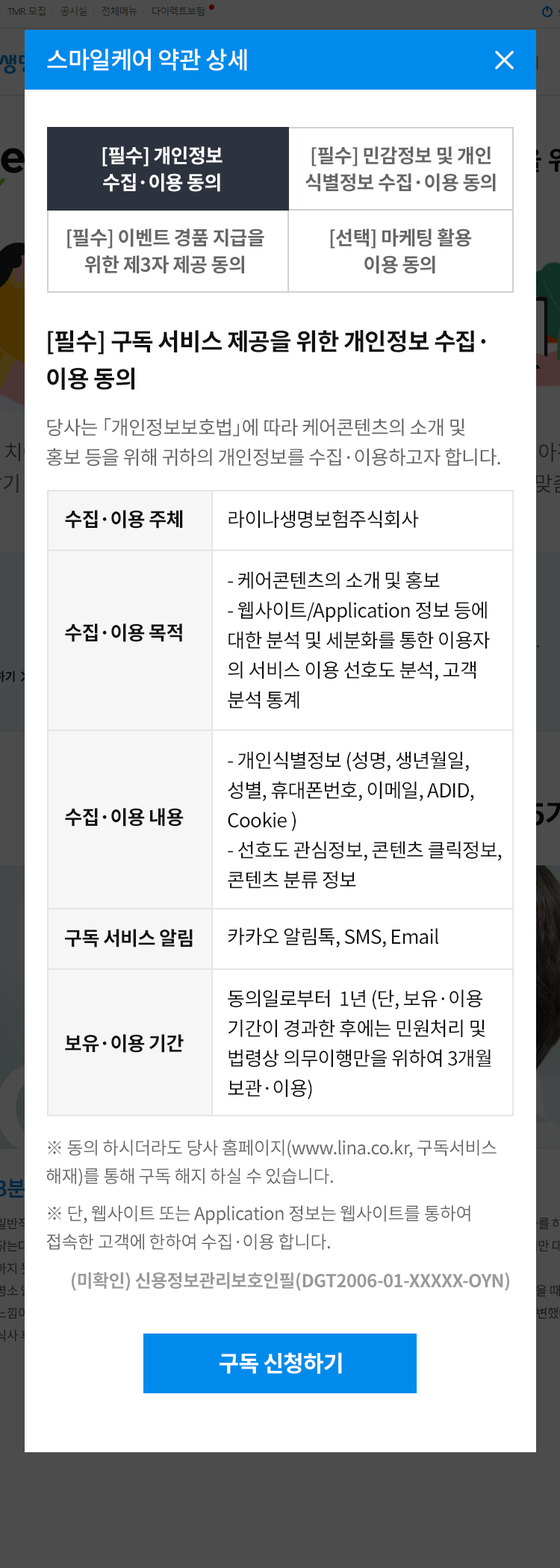
<style>
.page{position:relative;width:560px;height:1568px;background:#ffffff}
.page>*{position:absolute;margin:0}
.t1{font:23.9px "NotoSansCJKkr-Medium";letter-spacing:-0.025em;color:#ffffff}
.t2{font:19.4px/26.9px "NotoSansCJKkr-Bold";letter-spacing:-0.025em;color:#ffffff}
.t3{font:19.4px/26.9px "NotoSansCJKkr-Bold";letter-spacing:-0.025em;color:#666666}
.t4{font:23.9px/37.3px "NotoSansCJKkr-Bold";letter-spacing:-0.025em;color:#111111}
.t5{font:19.4px/29.9px "NotoSansCJKkr-Regular";letter-spacing:-0.025em;color:#666666}
.t6{font:19.4px "NotoSansCJKkr-Bold";letter-spacing:-0.025em;color:#111111}
.t7{font:19.4px "NotoSansCJKkr-Regular";letter-spacing:-0.025em;color:#111111}
.t8{font:19.4px/29.9px "NotoSansCJKkr-Regular";letter-spacing:-0.025em;color:#111111}
.t9{font:17.9px/28.4px "NotoSansCJKkr-Regular";letter-spacing:-0.025em;color:#666666}
.t10{font:17.9px/37.3px "NotoSansCJKkr-Regular";letter-spacing:-0.025em;color:#666666}
.t11{font:17.9px "NotoSansCJKkr-Bold";letter-spacing:-0.025em;color:#999999}
.t12{font:22.4px "NotoSansCJKkr-Bold";letter-spacing:-0.025em;color:#ffffff}
</style>
<div class="page">
<p class="t1" style="left:47px;top:49px;width:200px;height:22px">스마일케어 약관 상세</p>
<p class="t2" style="left:102px;top:146px;width:121px;height:46px;text-align:center">[필수] 개인정보<br>수집·이용 동의</p>
<p class="t3" style="left:305px;top:146px;width:191px;height:46px;text-align:center">[필수] 민감정보 및 개인<br>식별정보 수집·이용 동의</p>
<p class="t3" style="left:67px;top:228px;width:197px;height:46px;text-align:center">[필수] 이벤트 경품 지급을<br>위한 제3자 제공 동의</p>
<p class="t3" style="left:330px;top:228px;width:142px;height:46px;text-align:center">[선택] 마케팅 활용<br>이용 동의</p>
<p class="t4" style="left:47px;top:330px;width:439px;height:60px">[필수] 구독 서비스 제공을 위한 개인정보 수집·<br>이용 동의</p>
<p class="t5" style="left:46px;top:418px;width:454px;height:48px">당사는 「개인정보보호법」에 따라 케어콘텐츠의 소개 및 <br>홍보 등을 위해 귀하의 개인정보를 수집·이용하고자 합니다.</p>
<p class="t6" style="left:65px;top:510px;width:118px;height:19px">수집·이용 주체</p>
<p class="t7" style="left:228px;top:510px;width:191px;height:18px">라이나생명보험주식회사</p>
<p class="t8" style="left:228px;top:571px;width:262px;height:138px">- 케어콘텐츠의 소개 및 홍보<br>- 웹사이트/Application 정보 등에 <br>대한 분석 및 세분화를 통한 이용자<br>의 서비스 이용 선호도 분석, 고객 <br>분석 통계</p>
<p class="t6" style="left:65px;top:623px;width:117px;height:19px">수집·이용 목적</p>
<p class="t8" style="left:228px;top:751px;width:274px;height:138px">- 개인식별정보 (성명, 생년월일, <br>성별, 휴대폰번호, 이메일, ADID, <br>Cookie )<br>- 선호도 관심정보, 콘텐츠 클릭정보, <br>콘텐츠 분류 정보</p>
<p class="t6" style="left:65px;top:808px;width:119px;height:19px">수집·이용 내용</p>
<p class="t6" style="left:65px;top:929px;width:128px;height:19px">구독 서비스 알림</p>
<p class="t7" style="left:228px;top:927px;width:211px;height:21px">카카오 알림톡, SMS, Email</p>
<p class="t8" style="left:228px;top:989px;width:263px;height:111px">동의일로부터  1년 (단, 보유·이용 <br>기간이 경과한 후에는 민원처리 및 <br>법령상 의무이행만을 위하여 3개월  <br>보관·이용)</p>
<p class="t6" style="left:65px;top:1034px;width:119px;height:19px">보유·이용 기간</p>
<p class="t9" style="left:46px;top:1139px;width:451px;height:111px">※ 동의 하시더라도 당사 홈페이지(www.lina.co.kr, 구독서비스<br>해재)를 통해 구독 해지 하실 수 있습니다.<br><span class="t10">※ 단, 웹사이트 또는 Application 정보는 웹사이트를 통하여 <br></span>접속한 고객에 한하여 수집·이용 합니다.</p>
<p class="t11" style="left:72px;top:1272px;width:437px;height:19px">(미확인) 신용정보관리보호인필(DGT2006-01-XXXXX-OYN)</p>
<p class="t12" style="left:220px;top:1352px;width:122px;height:22px">구독 신청하기</p>
</div>
